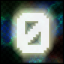
<style>
.page{position:relative;width:64px;height:64px}
.page>*{position:absolute;margin:0}
.t1{font:48px "M52_CHAINSAW-KISSED-THE-BIT";color:#ffffff}
</style>
<div class="page">
<p class="t1" style="left:17px;top:13px;width:32px;height:40px;opacity:0.9">0</p>
</div>
